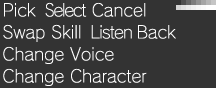
<style>
.page{position:relative;width:216px;height:88px;background:#333333}
.page>*{position:absolute;margin:0}
.t1{font:17px/22px "RodinNTLGPro-L";color:#ffffff}
.t2{font:17px/22px "RodinNTLGPro-L";letter-spacing:-0.075em;color:#ffffff;scale:0.9 1}
.t3{font:17px/22px "RodinNTLGPro-L";letter-spacing:-0.075em;color:#ffffff}
.t4{font:17px/22px "RodinNTLGPro-L";letter-spacing:-0.05em;color:#ffffff}
</style>
<div class="page">
<p class="t1" style="left:3px;top:2px;width:173px;height:84px">Pick  <span class="t2">S</span><span class="t3">elect </span>Cancel<br>Swap Skill  <span class="t4">Listen </span>Back<br>Change Voice<br>Change Character</p>
</div>
